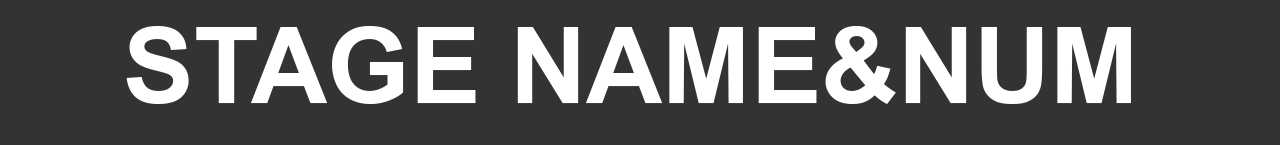
<style>
.page{position:relative;width:1280px;height:145px;background:#333333}
.page>*{position:absolute;margin:0}
.t1{font:105.8px "Arial-BoldMT";color:#ffffff}
</style>
<div class="page">
<p class="t1" style="left:126px;top:26px;width:1005px;height:78px">STAGE NAME&amp;NUM</p>
</div>
